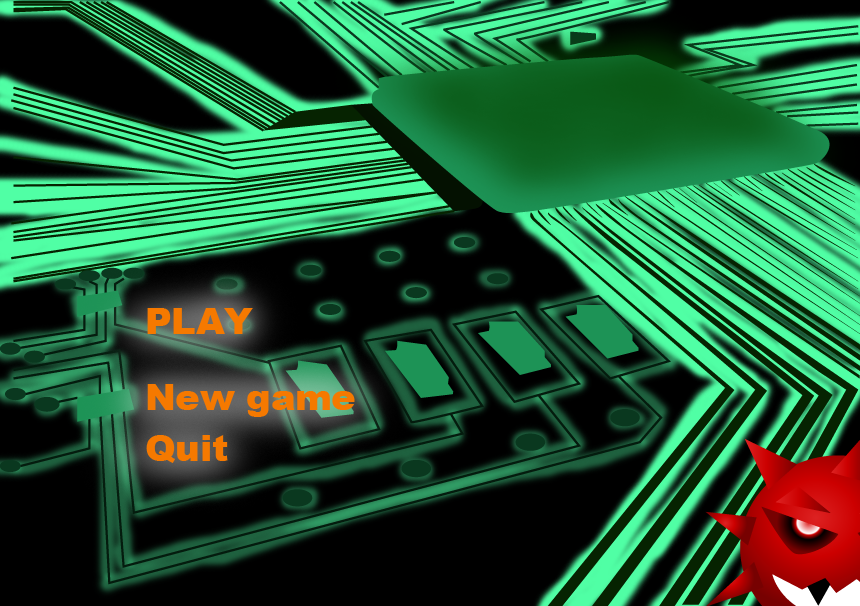
<style>
.page{position:relative;width:860px;height:606px}
.page>*{position:absolute;margin:0}
.t1{font:36px "Arial-Black";letter-spacing:-0.005em;color:#f57900}
</style>
<div class="page">
<p class="t1" style="left:147px;top:308px;width:106px;height:26px">PLAY</p>
<p class="t1" style="left:147px;top:384px;width:208px;height:33px">New game</p>
<p class="t1" style="left:146px;top:435px;width:82px;height:28px">Quit</p>
</div>
